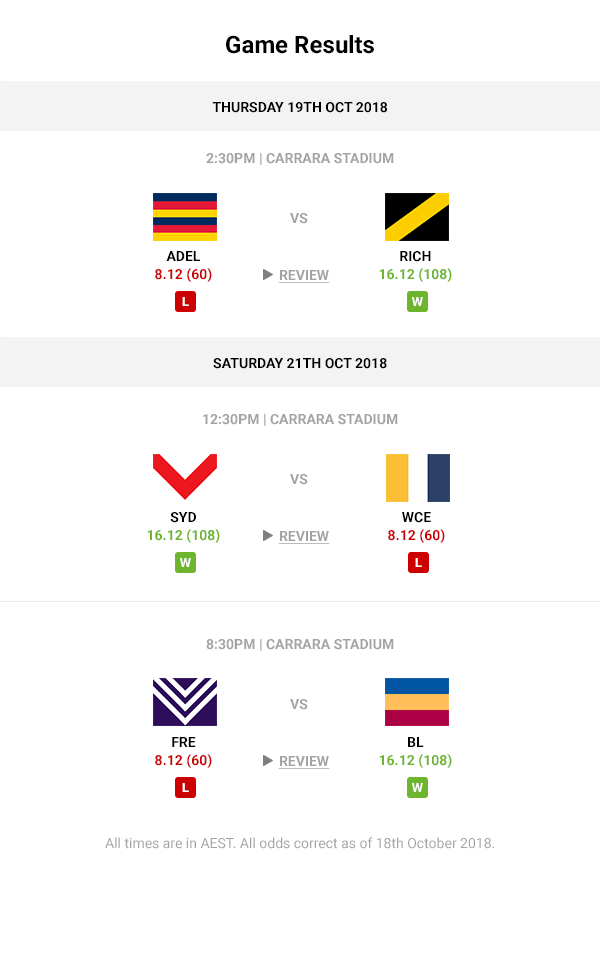
<style>
.page{position:relative;width:600px;height:969px;background:#ffffff}
.page>*{position:absolute;margin:0}
.t1{font:24px "Roboto-Bold";color:#000000}
.t2{font:14px "Roboto-Bold";color:#000000}
.t3{font:14px "Roboto-Bold";color:#a3a3a3}
.t4{font:14px/18px "Roboto-Bold";color:#cc0000}
.t5{font:14px/18px "Roboto-Bold";color:#000000}
.t6{font:14px/18px "Roboto-Bold";color:#6cb52d}
.t7{font:14px "Roboto-Bold";color:#a3a3a3;text-decoration:underline}
.t8{font:12.8px "Roboto-Bold";color:#ffffff}
.t9{font:14px "Roboto-Regular";color:#a3a3a3}
</style>
<div class="page">
<p class="t1" style="left:226px;top:35px;width:148px;height:19px">Game Results</p>
<p class="t2" style="left:212px;top:102px;width:175px;height:11px">THURSDAY 19TH OCT 2018</p>
<p class="t3" style="left:206px;top:153px;width:188px;height:12px">2:30PM | CARRARA STADIUM</p>
<p class="t3" style="left:290px;top:213px;width:18px;height:11px">VS</p>
<p class="t4" style="left:155px;top:251px;width:57px;height:31px;text-align:center"><span class="t5">ADEL<br></span>8.12 (60)</p>
<p class="t6" style="left:379px;top:251px;width:73px;height:31px;text-align:center"><span class="t5">RICH<br></span>16.12 (108)</p>
<p class="t7" style="left:278px;top:270px;width:52px;height:13px">REVIEW</p>
<p class="t8" style="left:182px;top:297px;width:7px;height:9px">L</p>
<p class="t8" style="left:412px;top:297px;width:11px;height:9px">W</p>
<p class="t2" style="left:213px;top:358px;width:174px;height:11px">SATURDAY 21TH OCT 2018</p>
<p class="t3" style="left:203px;top:414px;width:195px;height:12px">12:30PM | CARRARA STADIUM</p>
<p class="t3" style="left:290px;top:474px;width:18px;height:11px">VS</p>
<p class="t6" style="left:147px;top:512px;width:73px;height:31px;text-align:center"><span class="t5">SYD<br></span>16.12 (108)</p>
<p class="t4" style="left:388px;top:512px;width:57px;height:31px;text-align:center"><span class="t5">WCE<br></span>8.12 (60)</p>
<p class="t7" style="left:278px;top:531px;width:52px;height:13px">REVIEW</p>
<p class="t8" style="left:180px;top:558px;width:11px;height:9px">W</p>
<p class="t8" style="left:415px;top:558px;width:7px;height:9px">L</p>
<p class="t3" style="left:206px;top:639px;width:188px;height:12px">8:30PM | CARRARA STADIUM</p>
<p class="t3" style="left:290px;top:699px;width:18px;height:11px">VS</p>
<p class="t4" style="left:155px;top:737px;width:57px;height:31px;text-align:center"><span class="t5">FRE<br></span>8.12 (60)</p>
<p class="t6" style="left:379px;top:737px;width:73px;height:31px;text-align:center"><span class="t5">BL<br></span>16.12 (108)</p>
<p class="t7" style="left:278px;top:756px;width:52px;height:13px">REVIEW</p>
<p class="t8" style="left:182px;top:783px;width:7px;height:9px">L</p>
<p class="t8" style="left:412px;top:783px;width:11px;height:9px">W</p>
<p class="t9" style="left:105px;top:837px;width:389px;height:12px">All times are in AEST. All odds correct as of 18th October 2018.</p>
</div>
